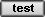
<style>
.page{position:relative;width:45px;height:17px}
.page>*{position:absolute;margin:0}
.t1{font:11px "Arial-BoldMT";color:#000000}
</style>
<div class="page">
<p class="t1" style="left:13px;top:4px;width:21px;height:8px">test</p>
</div>
